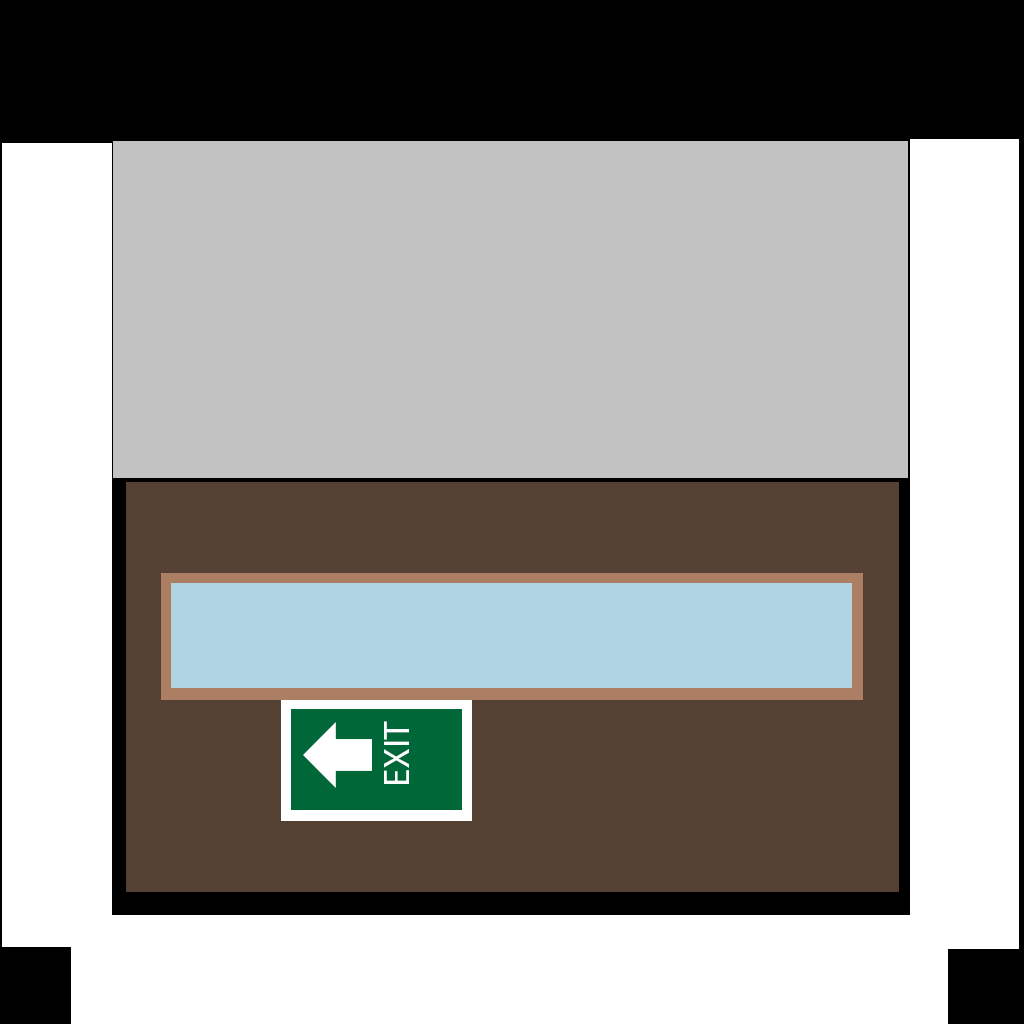
<style>
.page{position:relative;width:1024px;height:1024px;background:#ffffff}
.page>*{position:absolute;margin:0}
.t1{font:36px "MyriadPro-Regular";color:#ffffff}
</style>
<div class="page">
<p class="t1" style="left:384px;top:721px;width:25px;height:63px;rotate:-90deg">EXIT</p>
</div>
